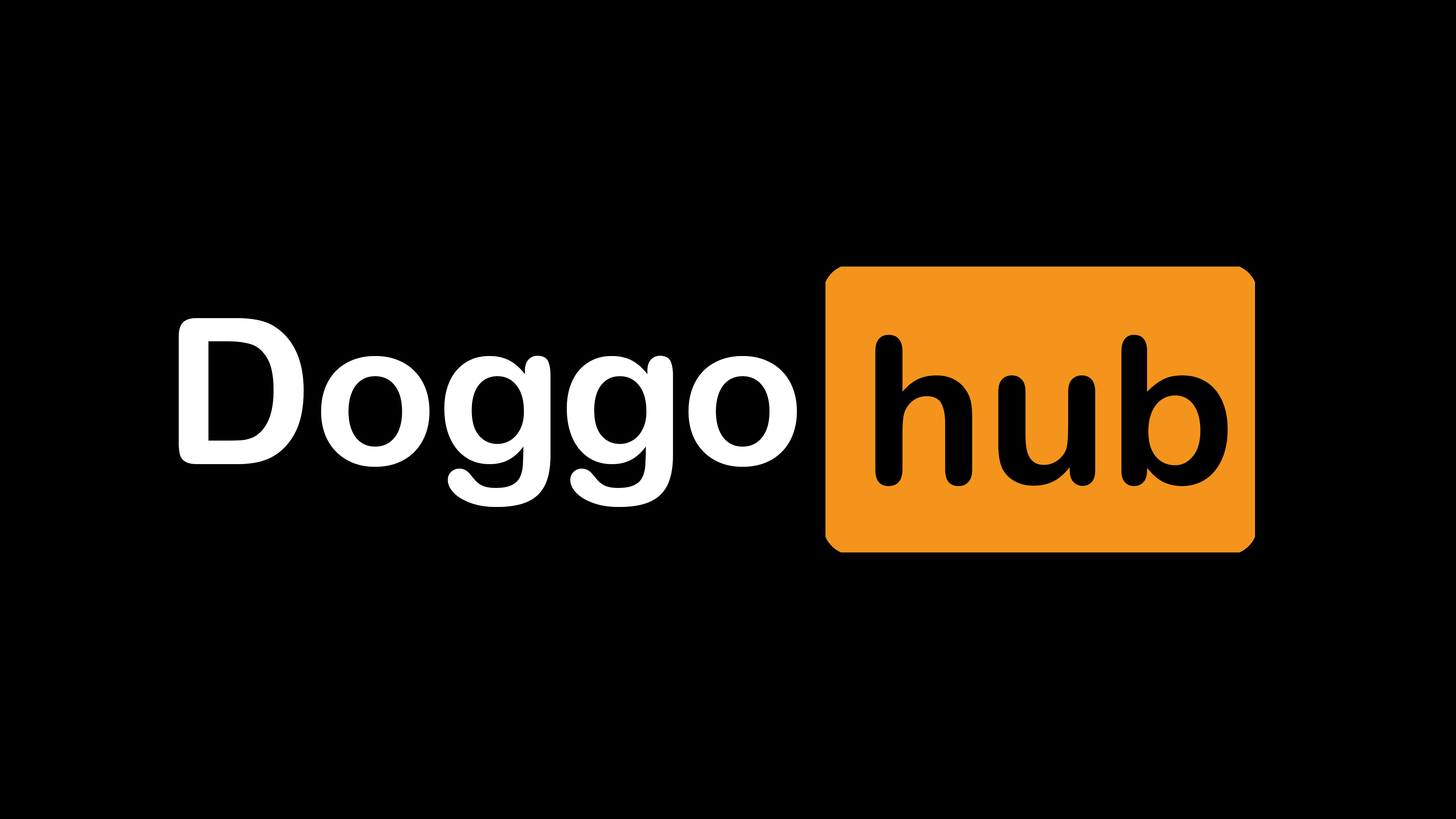
<style>
.page{position:relative;width:1456px;height:819px;background:#000000}
.page>*{position:absolute;margin:0}
.t1{font:203.8px "ArialRoundedMTBold";color:#ffffff}
.t2{font:203.8px "ArialRoundedMTBold";color:#000000}
</style>
<div class="page">
<p class="t1" style="left:179px;top:318px;width:618px;height:189px">Doggo</p>
<p class="t2" style="left:875px;top:335px;width:353px;height:151px">hub</p>
</div>
